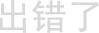
<style>
.page{position:relative;width:99px;height:33px;background:#ffffff}
.page>*{position:absolute;margin:0}
.t1{font:36px "SimHei";color:#d8d8d8}
</style>
<div class="page">
<p class="t1" style="left:0px;top:0px;width:99px;height:33px">出错了</p>
</div>
